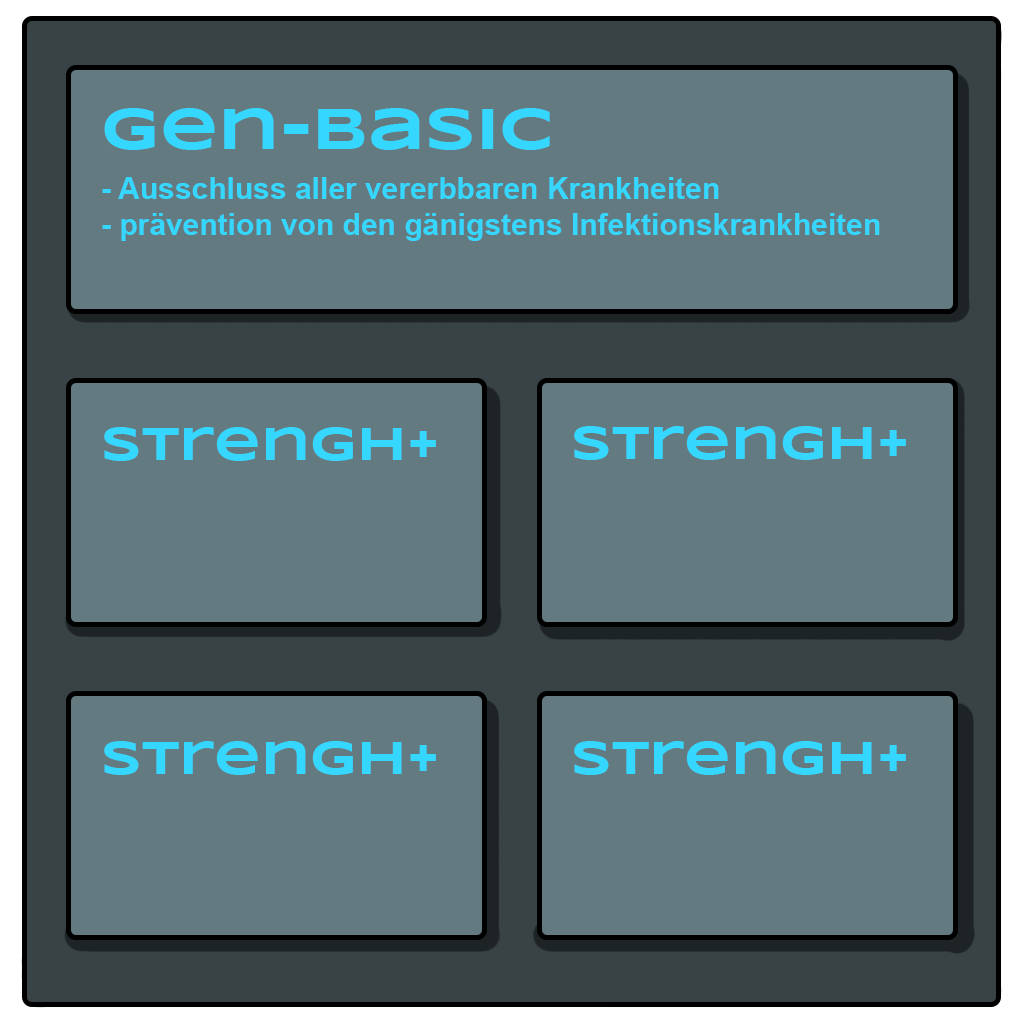
<style>
.page{position:relative;width:1024px;height:1024px;background:#637a81}
.page>*{position:absolute;margin:0}
.t1{font:60px "Syncopate-Bold";color:#36d7ff}
.t2{font:30px "Arial-BoldMT";color:#36d7ff}
.t3{font:48px "Syncopate-Bold";color:#36d7ff}
</style>
<div class="page">
<p class="t1" style="left:104px;top:108px;width:446px;height:42px">Gen-Basic</p>
<p class="t2" style="left:102px;top:177px;width:778px;height:64px">- Ausschluss aller vererbbaren Krankheiten<br>- prävention von den gänigstens Infektionskrankheiten</p>
<p class="t3" style="left:104px;top:427px;width:332px;height:34px">Strengh+</p>
<p class="t3" style="left:574px;top:426px;width:332px;height:34px">Strengh+</p>
<p class="t3" style="left:104px;top:741px;width:332px;height:34px">Strengh+</p>
<p class="t3" style="left:574px;top:741px;width:332px;height:34px">Strengh+</p>
</div>
